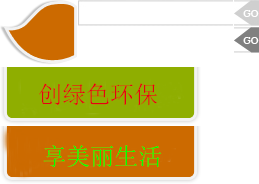
<style>
.page{position:relative;width:259px;height:184px;background:#ffffff}
.page>*{position:absolute;margin:0}
.t1{font:24px "SimSun";color:#e60012}
.t2{font:24px "SimSun";color:#00ff00}
</style>
<div class="page">
<p class="t1" style="left:39px;top:83px;width:118px;height:23px">创绿色环保</p>
<p class="t2" style="left:43px;top:145px;width:119px;height:23px">享美丽生活</p>
</div>
